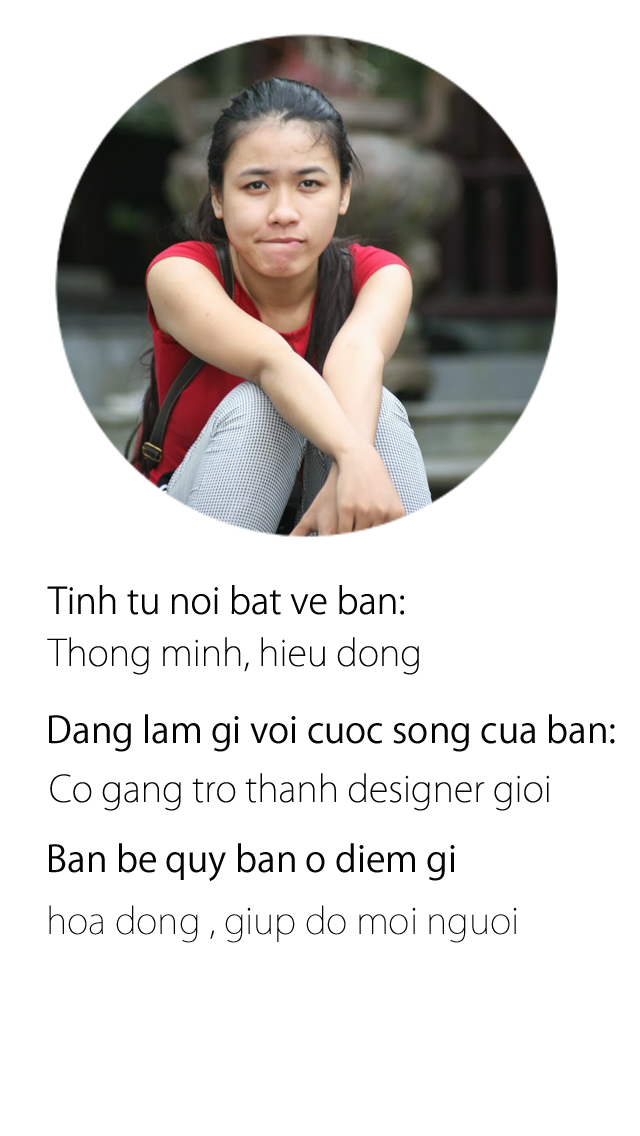
<style>
.page{position:relative;width:640px;height:1136px;background:#ffffff}
.page>*{position:absolute;margin:0}
.t1{font:36px "KozGoPro-Light";color:#040404}
.t2{font:36px "KozGoPro-ExtraLight";color:#040404}
.t3{font:36px "KozGoPro-Regular";color:#040404}
</style>
<div class="page">
<p class="t1" style="left:47px;top:585px;width:357px;height:30px">Tinh tu noi bat ve ban:</p>
<p class="t2" style="left:47px;top:637px;width:372px;height:38px">Thong minh, hieu dong</p>
<p class="t3" style="left:49px;top:714px;width:566px;height:38px">Dang lam gi voi cuoc song cua ban:</p>
<p class="t2" style="left:50px;top:773px;width:500px;height:38px">Co gang tro thanh designer gioi</p>
<p class="t3" style="left:49px;top:843px;width:406px;height:38px">Ban be quy ban o diem gi</p>
<p class="t2" style="left:49px;top:905px;width:468px;height:38px">hoa dong , giup do moi nguoi</p>
</div>
